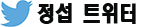
<style>
.page{position:relative;width:143px;height:27px;background:#ffffff}
.page>*{position:absolute;margin:0}
.t1{font:21.1px "HeadlineR-HM";color:#090a0a;scale:0.87 1}
</style>
<div class="page">
<p class="t1" style="left:37px;top:3px;width:99px;height:21px">정섭 트위터</p>
</div>
